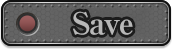
<style>
.page{position:relative;width:172px;height:49px}
.page>*{position:absolute;margin:0}
.t1{font:30px "RyuminPro-ExBold";letter-spacing:-0.04em;color:#b8b8b8}
</style>
<div class="page">
<p class="t1" style="left:73px;top:11px;width:60px;height:24px">Save</p>
</div>
